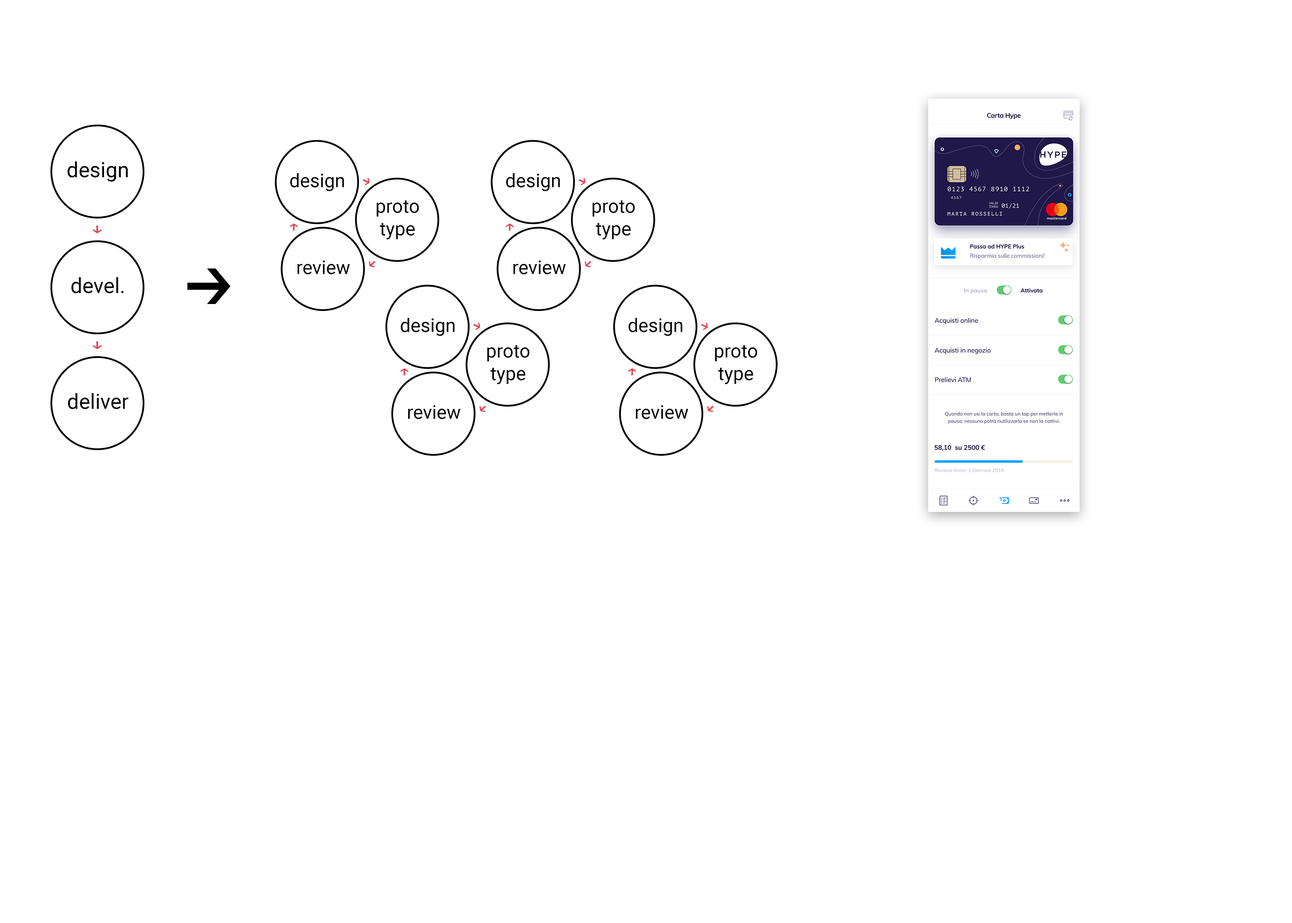
<style>
.page{position:relative;width:1292px;height:923px;background:#ffffff}
.page>*{position:absolute;margin:0}
.t1{font:21.1px "Roboto-Regular";color:#010000}
.t2{font:18.9px "Roboto-Regular";color:#010000}
</style>
<div class="page">
<p class="t1" style="left:68px;top:161px;width:60px;height:21px">design</p>
<p class="t2" style="left:290px;top:173px;width:54px;height:18px">design</p>
<p class="t2" style="left:506px;top:173px;width:54px;height:18px">design</p>
<p class="t2" style="left:376px;top:200px;width:43px;height:40px;text-align:center">proto<br>type</p>
<p class="t2" style="left:592px;top:200px;width:43px;height:40px;text-align:center">proto<br>type</p>
<p class="t2" style="left:297px;top:260px;width:53px;height:15px">review</p>
<p class="t2" style="left:513px;top:260px;width:53px;height:15px">review</p>
<p class="t1" style="left:71px;top:277px;width:53px;height:17px">devel.</p>
<p class="t2" style="left:401px;top:318px;width:54px;height:18px">design</p>
<p class="t2" style="left:628px;top:318px;width:54px;height:18px">design</p>
<p class="t2" style="left:487px;top:345px;width:43px;height:39px;text-align:center">proto<br>type</p>
<p class="t2" style="left:715px;top:345px;width:42px;height:39px;text-align:center">proto<br>type</p>
<p class="t1" style="left:68px;top:393px;width:61px;height:16px">deliver</p>
<p class="t2" style="left:408px;top:405px;width:52px;height:14px">review</p>
<p class="t2" style="left:636px;top:405px;width:52px;height:14px">review</p>
</div>
